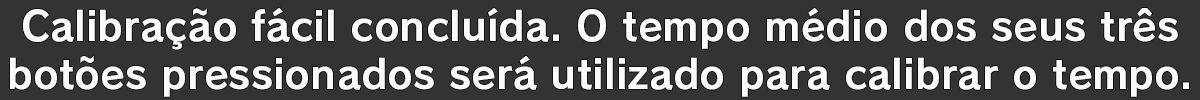
<style>
.page{position:relative;width:1200px;height:100px;background:#333333}
.page>*{position:absolute;margin:0}
.t1{font:40px/48px "RodinPro-B";color:#fbfafb}
</style>
<div class="page">
<p class="t1" style="left:10px;top:7px;width:1179px;height:90px;text-align:center">Calibração fácil concluída. O tempo médio dos seus três<br>botões pressionados será utilizado para calibrar o tempo.</p>
</div>
